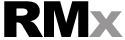
<style>
.page{position:relative;width:125px;height:40px;background:#ffffff}
.page>*{position:absolute;margin:0}
.t1{font:50px "Arial-Black";letter-spacing:-0.05em;color:#000000;scale:1.1 1}
.t2{font:36px "Arial-Black";letter-spacing:-0.05em;color:#979595;scale:1.21 1}
</style>
<div class="page">
<p class="t1" style="left:4px;top:1px;width:119px;height:36px">RM<span class="t2">X</span></p>
</div>
